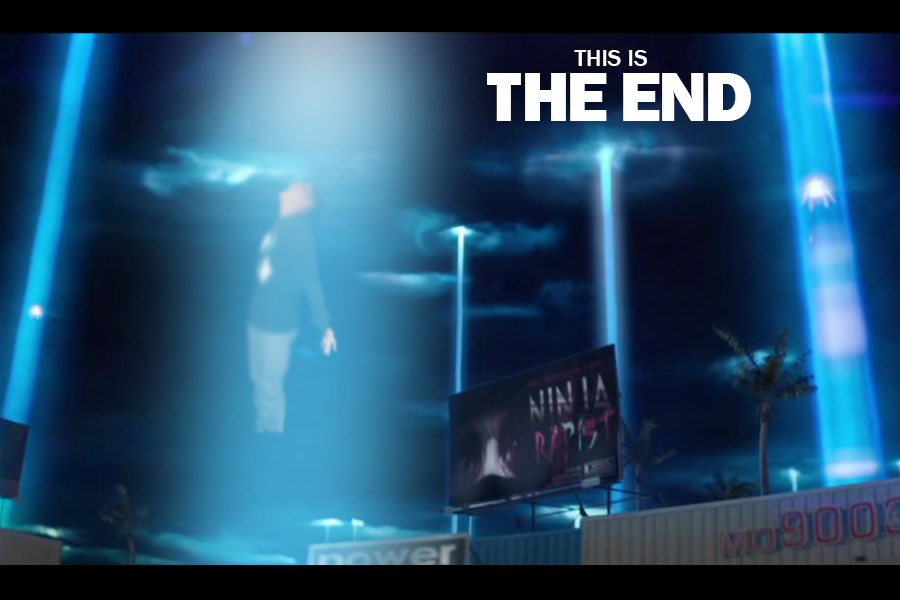
<style>
.page{position:relative;width:900px;height:600px}
.page>*{position:absolute;margin:0}
.t1{font:24px/55px "FranklinGothic-Medium";color:#ffffff}
.t2{font:72px/55px "FranklinGothic-Heavy";letter-spacing:-0.05em;color:#ffffff}
</style>
<div class="page">
<p class="t1" style="left:487px;top:50px;width:264px;height:71px;text-align:center">THIS IS<br> <span class="t2">THE END</span></p>
</div>
